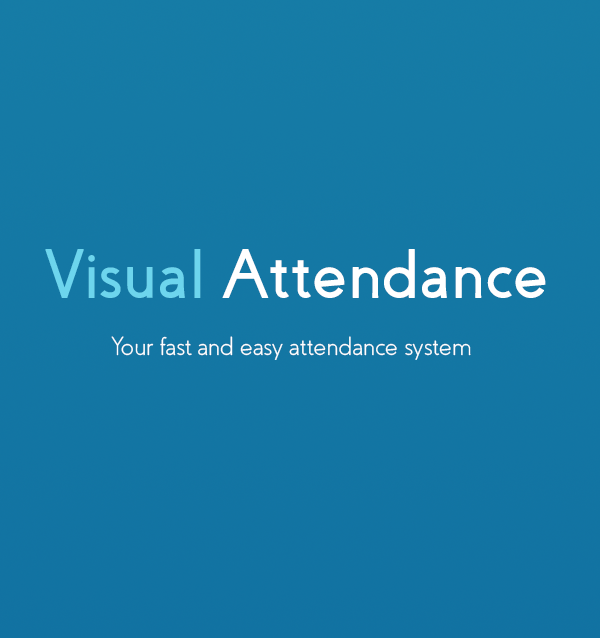
<style>
.page{position:relative;width:600px;height:638px}
.page>*{position:absolute;margin:0}
.t1{font:70px "Coves-Bold";color:#ffffff}
.t2{font:70px "Coves-Bold";color:#6dd5ed}
.t3{font:26px "Coves-Light";color:#ffffff}
</style>
<div class="page">
<p class="t1" style="left:45px;top:249px;width:501px;height:49px"><span class="t2">Visual</span> Attendance</p>
<p class="t3" style="left:111px;top:336px;width:360px;height:24px">Your fast and easy attendance system</p>
</div>
